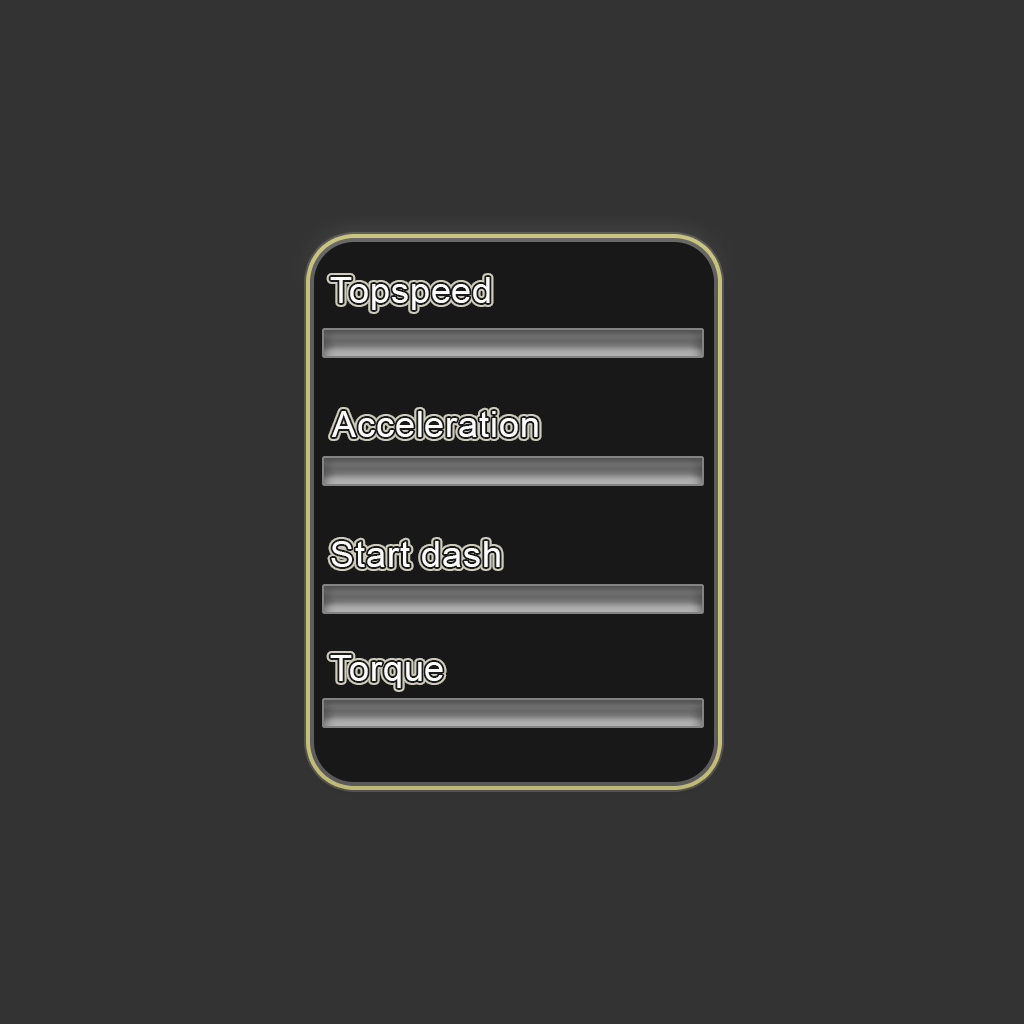
<style>
.page{position:relative;width:1024px;height:1024px;background:#333333}
.page>*{position:absolute;margin:0}
.t1{font:36px "ArialMT";letter-spacing:0.025em;color:#ffffff}
</style>
<div class="page">
<p class="t1" style="left:330px;top:277px;width:160px;height:33px">Topspeed</p>
<p class="t1" style="left:332px;top:411px;width:206px;height:26px">Acceleration</p>
<p class="t1" style="left:331px;top:541px;width:169px;height:26px">Start dash</p>
<p class="t1" style="left:330px;top:655px;width:113px;height:33px">Torque</p>
</div>
